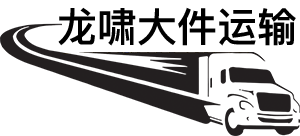
<style>
.page{position:relative;width:300px;height:136px;background:#ffffff}
.page>*{position:absolute;margin:0}
.t1{font:40px "PingFangSC-Semibold";color:#000000}
</style>
<div class="page">
<p class="t1" style="left:58px;top:7px;width:238px;height:39px">龙啸大件运输</p>
</div>
